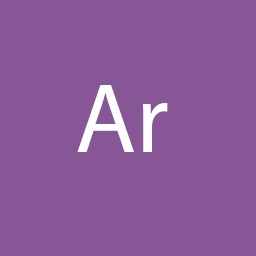
<style>
.page{position:relative;width:256px;height:256px;background:#865696}
.page>*{position:absolute;margin:0}
.t1{font:100px "MyriadPro-Regular";color:#ffffff}
</style>
<div class="page">
<p class="t1" style="left:77px;top:85px;width:91px;height:67px">Ar</p>
</div>
